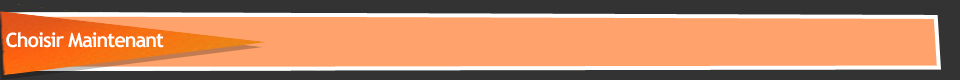
<style>
.page{position:relative;width:960px;height:80px;background:#ffa26b}
.page>*{position:absolute;margin:0}
.t1{font:20px "TrebuchetMS-Bold";letter-spacing:-0.05em;color:#ffffff}
</style>
<div class="page">
<p class="t1" style="left:6px;top:32px;width:158px;height:16px">Choisir Maintenant</p>
</div>
